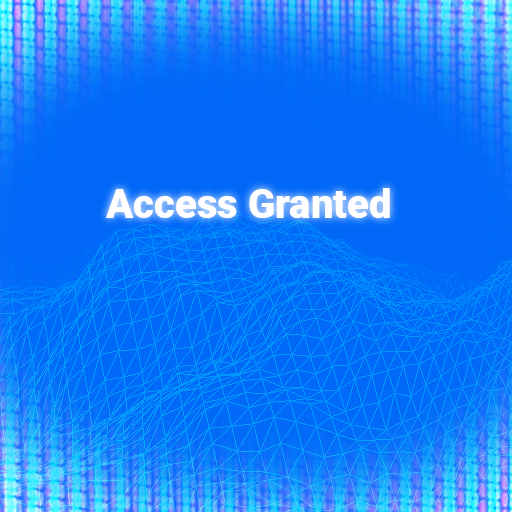
<style>
.page{position:relative;width:512px;height:512px;background:#0067f7}
.page>*{position:absolute;margin:0}
.t1{font:40px "Roboto-Black";color:#ffffff}
</style>
<div class="page">
<p class="t1" style="left:105px;top:188px;width:285px;height:30px">Access Granted</p>
</div>
